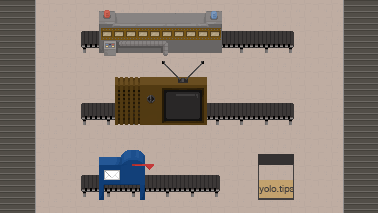
<style>
.page{position:relative;width:378px;height:213px;background:#bfada2}
.page>*{position:absolute;margin:0}
.t1{font:9.2px "HelveticaNeue";color:#423f3f}
</style>
<div class="page">
<p class="t1" style="left:259px;top:185px;width:35px;height:9px">yolo.tips</p>
</div>
